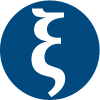
<style>
.page{position:relative;width:100px;height:100px;background:#004a80}
.page>*{position:absolute;margin:0}
.t1{font:96.3px "Cambria-Bold";letter-spacing:-0.1em;color:#ffffff;scale:0.91 1}
</style>
<div class="page">
<p class="t1" style="left:31px;top:8px;width:35px;height:89px">ξ</p>
</div>
